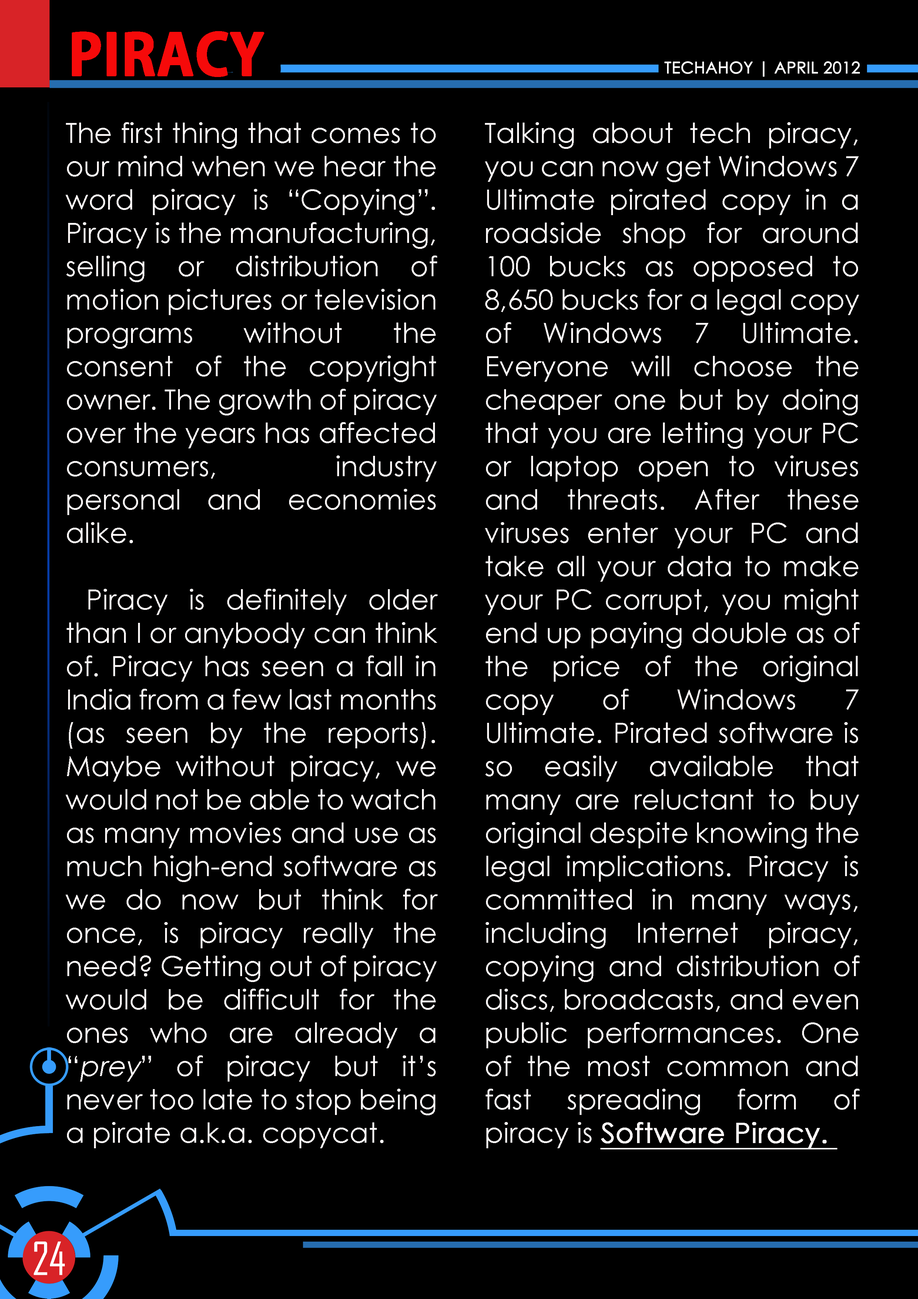
<style>
.page{position:relative;width:918px;height:1299px;background:#000000}
.page>*{position:absolute;margin:0}
.t1{font:55.5px "AdobeGothicStd-Bold";color:#f60a0a;text-transform:uppercase;font-weight:bold}
.t2{font:16px "CenturyGothic";color:#ffffff;text-transform:uppercase;font-weight:bold}
.t3{font:27.8px "CenturyGothic";color:#fbf7f7}
.t4{font:27.8px "CenturyGothic";color:#fbf7f7;font-style:italic}
.t5{font:27.8px "CenturyGothic";color:#fbf7f7;font-weight:bold;text-decoration:underline}
.t6{font:43.7px "AgencyFB-Reg";color:#ffffff;text-transform:uppercase}
</style>
<div class="page">
<p class="t1" style="left:72px;top:31px;width:192px;height:46px">piracy</p>
<p class="t2" style="left:665px;top:61px;width:195px;height:16px">techahoy | APRIL 2012</p>
<p class="t3" style="left:66px;top:122px;width:372px;height:1026px;text-align:justify">The first thing that comes to our mind when we hear the word piracy is “Copying”. Piracy is the manufacturing, selling or distribution of motion pictures or television programs without the consent of the copyright owner. The growth of piracy over the years has affected consumers, industry personal and economies alike.<br><br> Piracy is definitely older than I or anybody can think of. Piracy has seen a fall in India from a few last months (as seen by the reports). Maybe without piracy, we would not be able to watch as many movies and use as much high-end software as we do now but think for once, is piracy really the need? Getting out of piracy would be difficult for the ones who are already a “<span class="t4">prey</span>” of piracy but it’s never too late to stop being a pirate a.k.a. copycat.</p>
<p class="t3" style="left:485px;top:122px;width:375px;height:1027px;text-align:justify">Talking about tech piracy, you can now get Windows 7 Ultimate pirated copy in a roadside shop for around 100 bucks as opposed to 8,650 bucks for a legal copy of Windows 7 Ultimate. Everyone will choose the cheaper one but by doing that you are letting your PC or laptop open to viruses and threats. After these viruses enter your PC and take all your data to make your PC corrupt, you might end up paying double as of the price of the original copy of Windows 7 Ultimate. Pirated software is so easily available that many are reluctant to buy original despite knowing the legal implications. Piracy is committed in many ways, including Internet piracy, copying and distribution of discs, broadcasts, and even public performances. One of the most common and fast spreading form of piracy is <span class="t5">Software Piracy.</span></p>
<p class="t6" style="left:34px;top:1241px;width:31px;height:34px">24</p>
</div>
